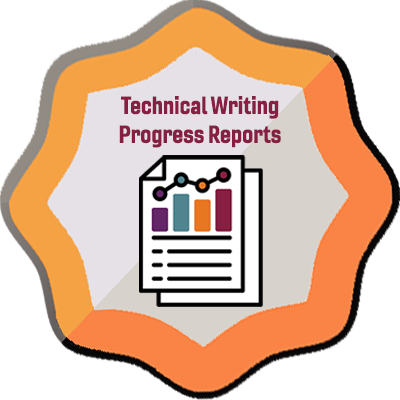
<style>
.page{position:relative;width:400px;height:400px;background:#ffffff}
.page>*{position:absolute;margin:0}
.t1{font:24px "Gineso-ConBol";color:#861f41}
</style>
<div class="page">
<p class="t1" style="left:119px;top:96px;width:162px;height:52px;text-align:center">Technical Writing<br>Progress Reports</p>
</div>
